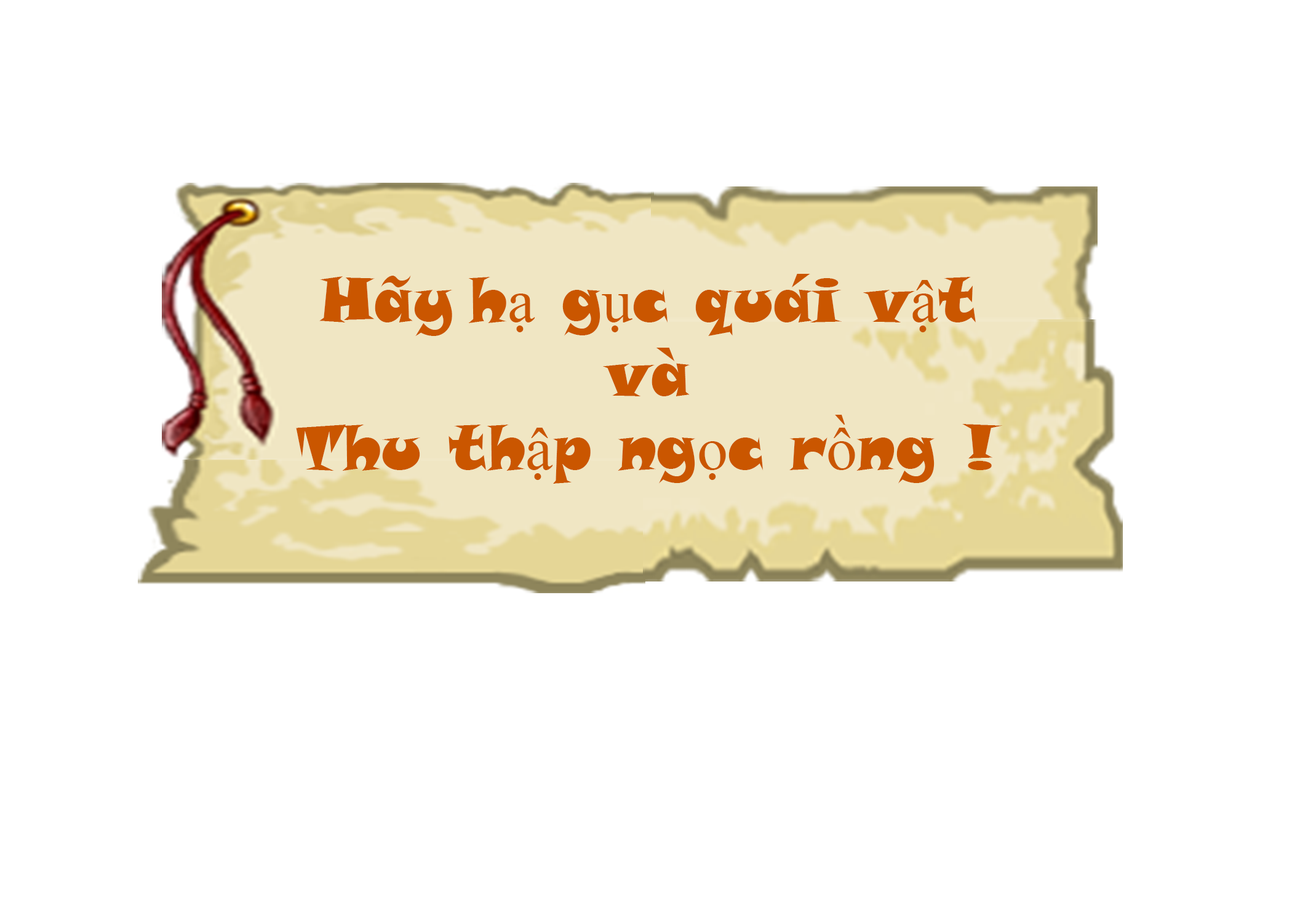
<style>
.page{position:relative;width:1292px;height:923px;background:#ffffff}
.page>*{position:absolute;margin:0}
.t1{font:61.5px "SnapITC-Regular";color:#ca5600}
.t2{font:61.5px "TimesNewRomanPSMT";color:#ca5600}
</style>
<div class="page">
<p class="t1" style="left:296px;top:274px;width:706px;height:210px;text-align:center">Hãy h<span class="t2">ạ</span> g<span class="t2">ụ</span>c quái v<span class="t2">ậ</span>t<br>và<br>Thu th<span class="t2">ậ</span>p ng<span class="t2">ọ</span>c r<span class="t2">ồ</span>ng !</p>
</div>
